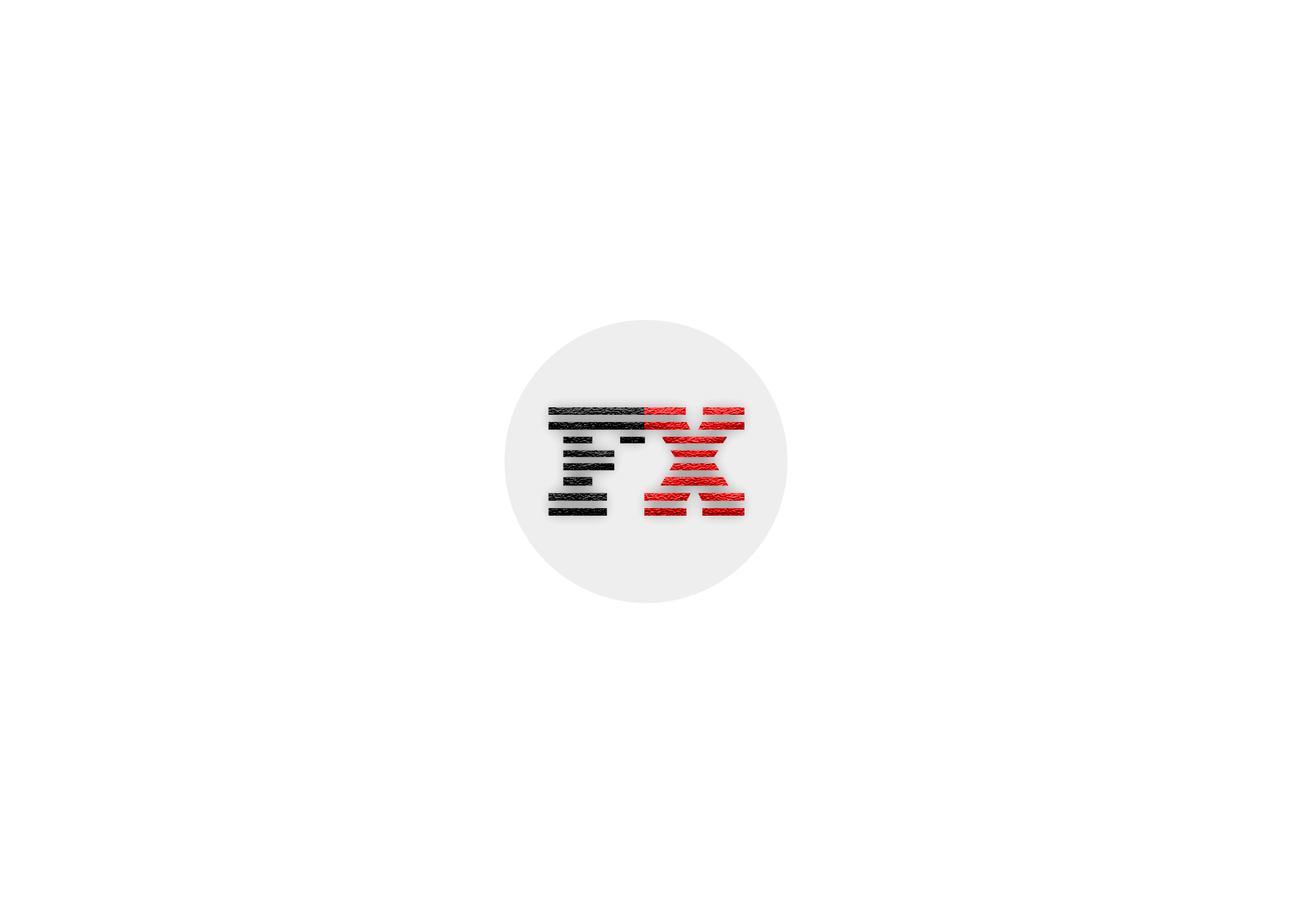
<style>
.page{position:relative;width:1292px;height:923px;background:#ffffff}
.page>*{position:absolute;margin:0}
.t1{font:153.8px "MeninBlue"}
</style>
<div class="page">
<p class="t1" style="left:548px;top:407px;width:196px;height:109px">Fx</p>
</div>
